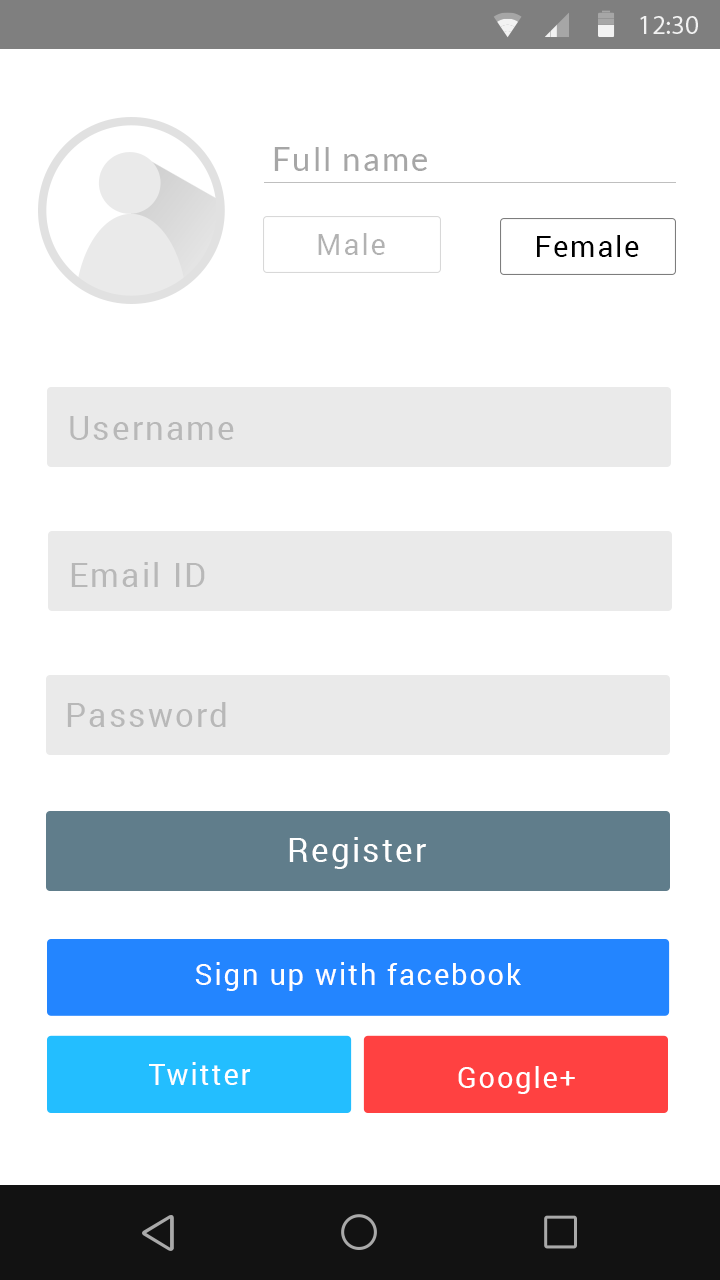
<style>
.page{position:relative;width:720px;height:1280px;background:#ffffff}
.page>*{position:absolute;margin:0}
.t1{font:33.3px "Lato-Regular";letter-spacing:0.06em;color:#a6a6a6}
.t2{font:29.2px "Roboto-Regular";letter-spacing:0.06em;color:#b2b2b2}
.t3{font:29.2px "Roboto-Regular";letter-spacing:0.06em;color:#000000}
.t4{font:33.3px "Roboto-Regular";letter-spacing:0.06em;color:#b8b8b8}
.t5{font:33.3px "Roboto-Regular";letter-spacing:0.06em;color:#ffffff}
.t6{font:29.2px "Roboto-Regular";letter-spacing:0.06em;color:#ffffff}
</style>
<div class="page">
<p class="t1" style="left:274px;top:147px;width:153px;height:24px">Full name</p>
<p class="t2" style="left:318px;top:233px;width:67px;height:22px">Male</p>
<p class="t3" style="left:537px;top:235px;width:102px;height:22px">Female</p>
<p class="t4" style="left:70px;top:416px;width:164px;height:24px">Username</p>
<p class="t4" style="left:71px;top:562px;width:134px;height:25px">Email ID</p>
<p class="t4" style="left:67px;top:702px;width:159px;height:25px">Password</p>
<p class="t5" style="left:289px;top:837px;width:137px;height:32px">Register</p>
<p class="t6" style="left:195px;top:962px;width:326px;height:29px">Sign up with facebook</p>
<p class="t6" style="left:149px;top:1062px;width:102px;height:23px">Twitter</p>
<p class="t6" style="left:458px;top:1066px;width:117px;height:28px">Google+</p>
</div>
